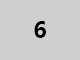
<style>
.page{position:relative;width:80px;height:60px;background:#cfcfcf}
.page>*{position:absolute;margin:0}
.t1{font:22px "MicrosoftYaHei-Bold";color:#000000}
</style>
<div class="page">
<p class="t1" style="left:34px;top:21px;width:12px;height:17px">6</p>
</div>
